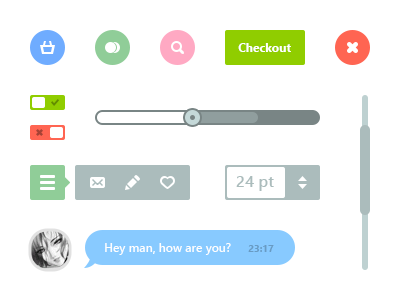
<style>
.page{position:relative;width:400px;height:300px;background:#ffffff}
.page>*{position:absolute;margin:0}
.t1{font:12px "SegoeUI-Bold";color:#ffffff}
.t2{font:16px "SegoeUI-Semibold";color:#abbcbc}
.t3{font:12px "SegoeUI-Semibold";color:#fefefe}
.t4{font:10px "SegoeUI-Bold";color:#689bc4}
</style>
<div class="page">
<p class="t1" style="left:238px;top:43px;width:53px;height:9px">Checkout</p>
<p class="t2" style="left:236px;top:176px;width:38px;height:15px">24 pt</p>
<p class="t3" style="left:105px;top:243px;width:169px;height:12px">Hey man, how are you? <span class="t4">23:17</span></p>
</div>
